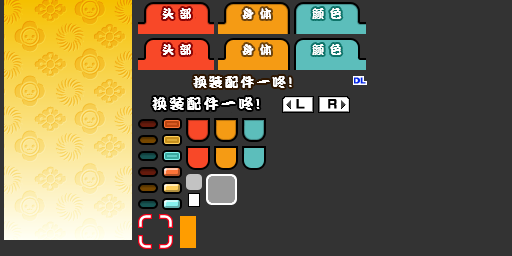
<style>
.page{position:relative;width:512px;height:256px;background:#333333}
.page>*{position:absolute;margin:0}
.t1{font:12px "DFPKanTingLiuW9";letter-spacing:0.075em;color:#ffffff}
.t2{font:14px "DFPKanTingLiuW9";letter-spacing:0.13em;color:#ffffff}
.t3{font:15px "DFPKanTingLiuW9";letter-spacing:0.15em;color:#ffffff}
</style>
<div class="page">
<p class="t1" style="left:162px;top:8px;width:29px;height:11px">头 部</p>
<p class="t1" style="left:242px;top:8px;width:29px;height:11px">身 体</p>
<p class="t1" style="left:312px;top:8px;width:30px;height:11px">颜 色</p>
<p class="t1" style="left:162px;top:44px;width:29px;height:11px">头 部</p>
<p class="t1" style="left:242px;top:44px;width:29px;height:11px">身 体</p>
<p class="t1" style="left:312px;top:44px;width:30px;height:11px">颜 色</p>
<p class="t2" style="left:193px;top:76px;width:99px;height:12px">换装配件一咚!</p>
<p class="t3" style="left:152px;top:97px;width:108px;height:14px">换装配件一咚!</p>
</div>
